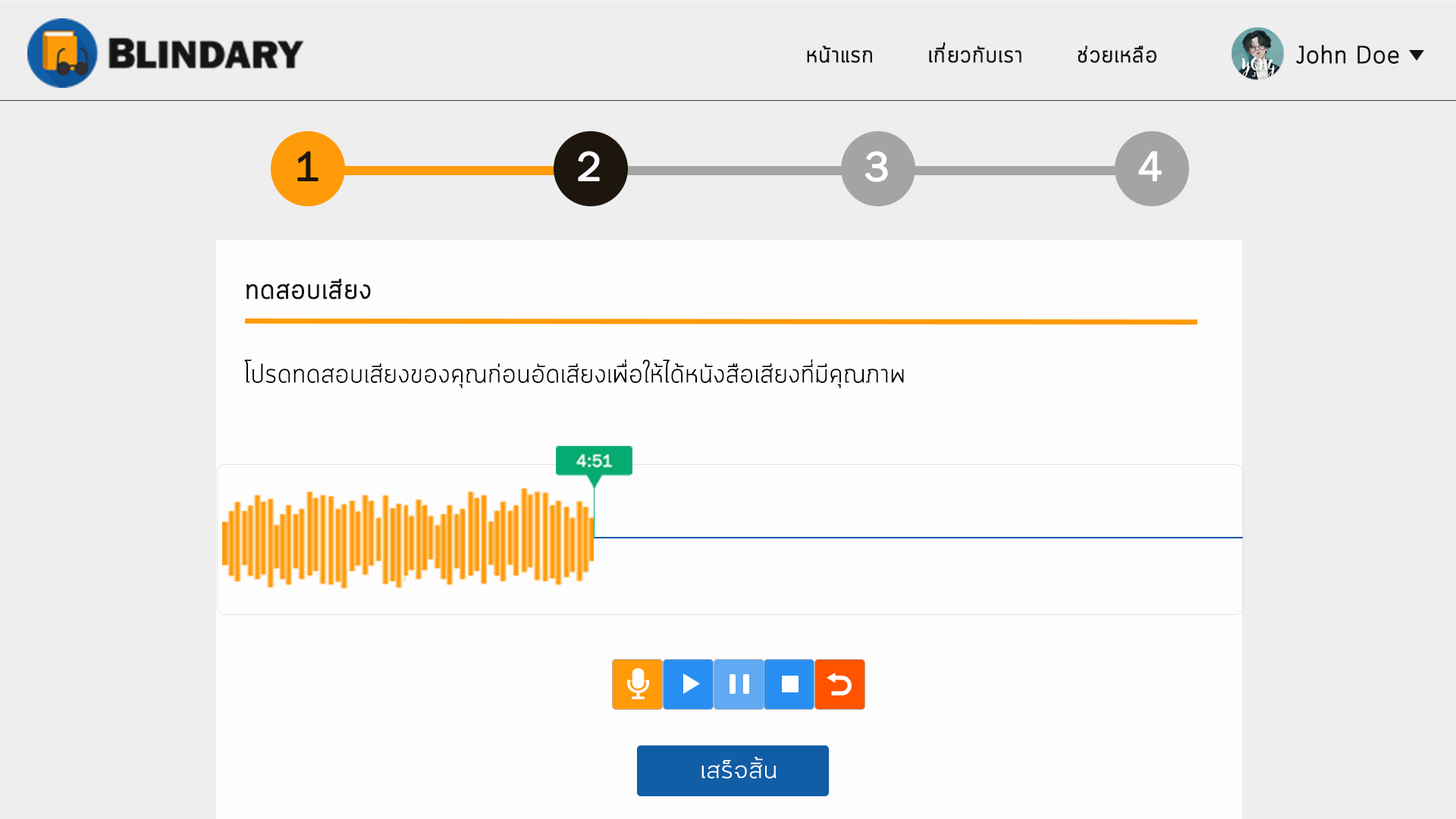
<style>
.page{position:relative;width:1456px;height:819px;background:#eeeeee}
.page>*{position:absolute;margin:0}
.t1{font:22.7px "Cloud-Light";color:#141414;font-weight:bold}
.t2{font:24.2px "Cloud-Light";color:#141414;font-weight:bold}
.t3{font:42.1px "FranklinGothic-Book";color:#1c160d;font-weight:bold}
.t4{font:42.1px "FranklinGothic-Book";color:#fefefe;font-weight:bold}
.t5{font:42.1px "FranklinGothic-Book";color:#ffffff;font-weight:bold}
.t6{font:27.3px "Cloud-Light";color:#141414;font-weight:bold}
.t7{font:26.9px "Cloud-Light";color:#000000}
.t8{font:24.4px "Cloud-Light";color:#ffffff;scale:1.15 1}
</style>
<div class="page">
<p class="t1" style="left:807px;top:42px;width:349px;height:21px">หน้าแรก       เกี่ยวกับเรา       ช่วยเหลือ</p>
<p class="t2" style="left:1296px;top:45px;width:103px;height:19px">John Doe</p>
<p class="t3" style="left:297px;top:151px;width:21px;height:30px">1</p>
<p class="t4" style="left:578px;top:151px;width:22px;height:30px">2</p>
<p class="t5" style="left:865px;top:151px;width:23px;height:31px">3</p>
<p class="t5" style="left:1138px;top:151px;width:24px;height:30px">4</p>
<p class="t6" style="left:246px;top:278px;width:125px;height:22px">ทดสอบเสียง</p>
<p class="t7" style="left:244px;top:359px;width:660px;height:29px">โปรดทดสอบเสียงของคุณก่อนอัดเสียงเพื่อให้ได้หนังสือเสียงที่มีคุณภาพ</p>
<p class="t8" style="left:701px;top:757px;width:76px;height:22px">เสร็จสิ้น</p>
</div>
